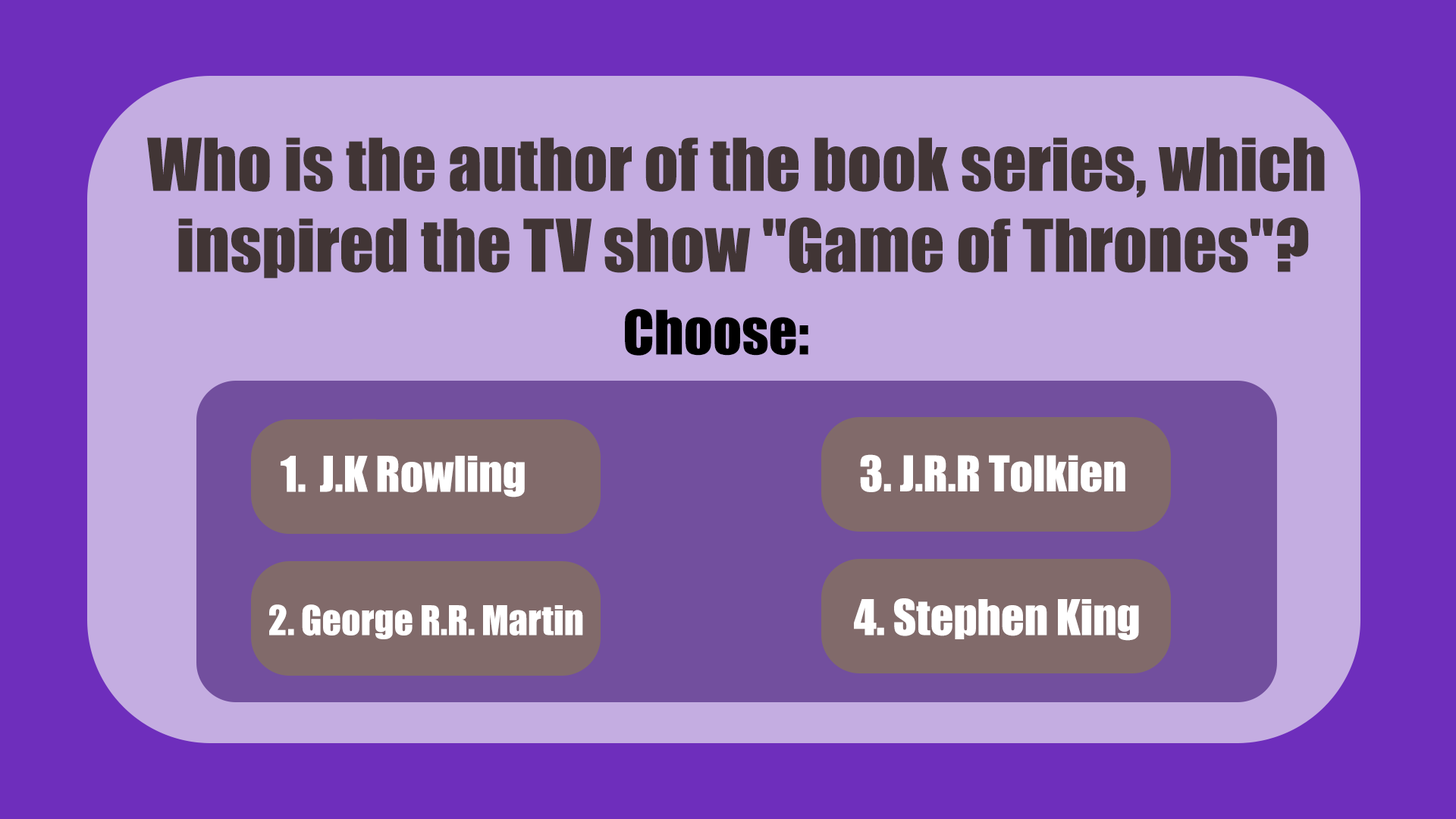
<style>
.page{position:relative;width:1456px;height:819px;background:#c4ade1}
.page>*{position:absolute;margin:0}
.t1{font:67.5px "Impact";color:#413535}
.t2{font:56.7px "Impact";color:#000000}
.t3{font:45.5px "Impact";color:#ffffff}
.t4{font:37.9px "Impact";color:#ffffff}
</style>
<div class="page">
<p class="t1" style="left:147px;top:137px;width:1178px;height:141px;text-align:center">Who is the author of the book series, which <br>inspired the TV show "Game of Thrones"?</p>
<p class="t2" style="left:625px;top:309px;width:183px;height:47px">Choose:</p>
<p class="t3" style="left:281px;top:456px;width:244px;height:41px">J.K Rowling</p>
<p class="t3" style="left:860px;top:454px;width:265px;height:38px">3. J.R.R Tolkien</p>
<p class="t4" style="left:269px;top:604px;width:314px;height:35px">2. George R.R. Martin</p>
<p class="t3" style="left:854px;top:598px;width:285px;height:43px">4. Stephen King</p>
</div>
